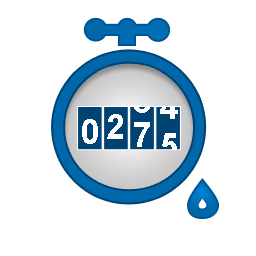
<style>
.page{position:relative;width:256px;height:256px;background:#ffffff}
.page>*{position:absolute;margin:0}
.t1{font:34.3px "Arial-BoldMT";color:#e4e4e4}
.t2{font:34.3px "Arial-BoldMT"}
.t3{font:34.3px "Arial-BoldMT";color:#ffffff}
</style>
<div class="page">
<p class="t1" style="left:134px;top:88px;width:16px;height:25px">8</p>
<p class="t2" style="left:160px;top:94px;width:18px;height:25px">4</p>
<p class="t3" style="left:82px;top:119px;width:16px;height:25px">0</p>
<p class="t3" style="left:107px;top:114px;width:16px;height:25px">2</p>
<p class="t3" style="left:134px;top:122px;width:16px;height:25px">7</p>
<p class="t3" style="left:161px;top:133px;width:16px;height:25px">5</p>
</div>
